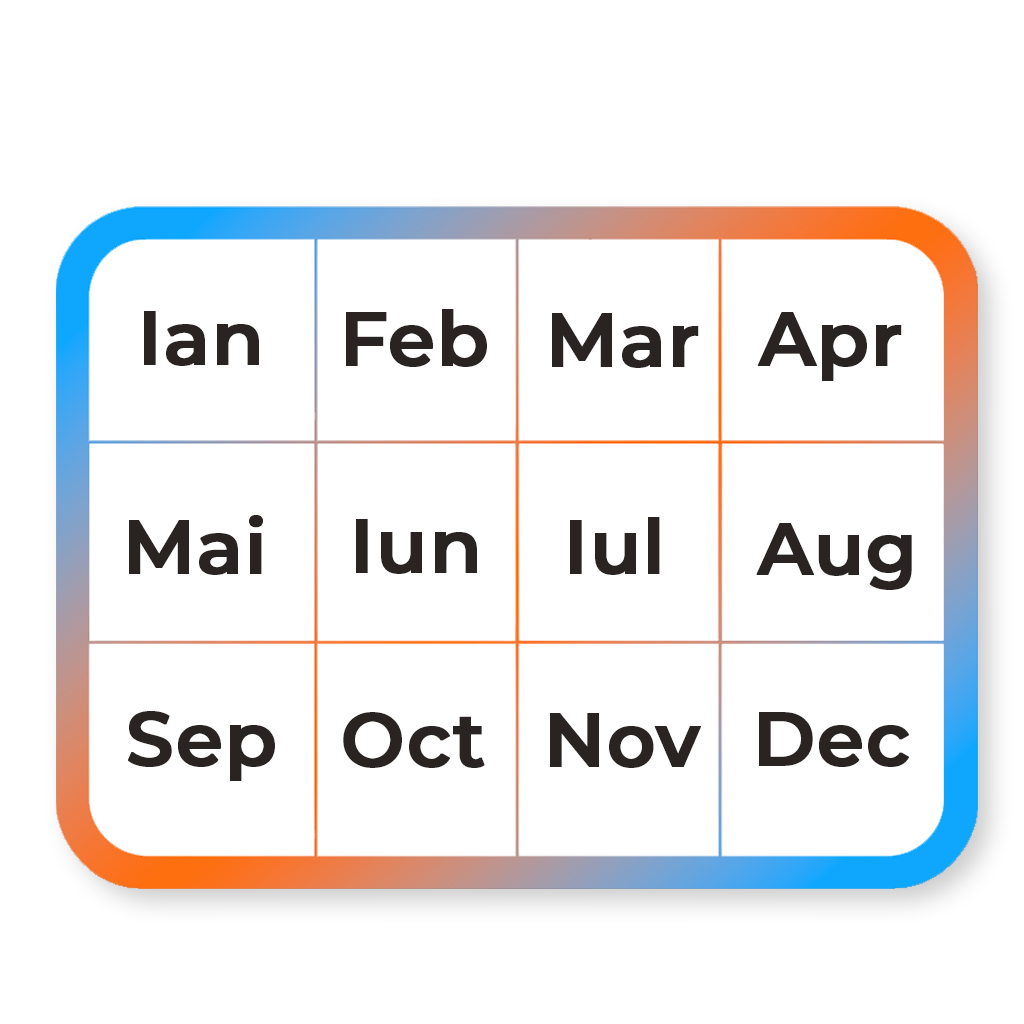
<style>
.page{position:relative;width:1024px;height:1024px;background:#ffffff}
.page>*{position:absolute;margin:0}
.t1{font:75.3px "Montserrat-SemiBold";color:#292421;font-weight:bold}
.t2{font:73.1px "Montserrat-SemiBold";color:#292421;font-weight:bold}
</style>
<div class="page">
<p class="t1" style="left:144px;top:311px;width:115px;height:55px">Ian</p>
<p class="t1" style="left:346px;top:309px;width:141px;height:58px">Feb</p>
<p class="t1" style="left:552px;top:313px;width:147px;height:55px">Mar</p>
<p class="t1" style="left:757px;top:312px;width:145px;height:69px">Apr</p>
<p class="t1" style="left:129px;top:515px;width:134px;height:60px">Mai</p>
<p class="t1" style="left:356px;top:519px;width:121px;height:55px">Iun</p>
<p class="t1" style="left:570px;top:517px;width:90px;height:58px">Iul</p>
<p class="t2" style="left:756px;top:523px;width:156px;height:67px">Aug</p>
<p class="t1" style="left:128px;top:711px;width:147px;height:70px">Sep</p>
<p class="t1" style="left:343px;top:712px;width:142px;height:56px">Oct</p>
<p class="t1" style="left:550px;top:713px;width:151px;height:55px">Nov</p>
<p class="t1" style="left:759px;top:712px;width:150px;height:55px">Dec</p>
</div>
